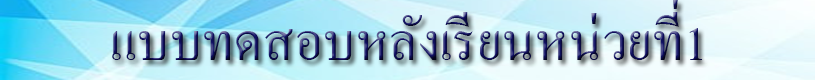
<style>
.page{position:relative;width:815px;height:80px}
.page>*{position:absolute;margin:0}
.t1{font:72px "AngsanaNew"}
</style>
<div class="page">
<p class="t1" style="left:112px;top:0px;width:590px;height:60px">แบบทดสอบหลังเรียนหน่วยที่1</p>
</div>
